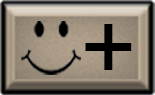
<style>
.page{position:relative;width:155px;height:95px}
.page>*{position:absolute;margin:0}
.t1{font:97px "ArialMT";color:#000000}
</style>
<div class="page">
<p class="t1" style="left:85px;top:24px;width:47px;height:46px">+</p>
</div>
